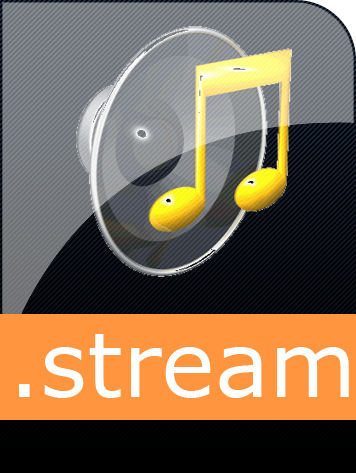
<style>
.page{position:relative;width:356px;height:473px}
.page>*{position:absolute;margin:0}
.t1{font:90px "Verdana";color:#ffffff}
</style>
<div class="page">
<p class="t1" style="left:19px;top:334px;width:330px;height:64px">.stream</p>
</div>
